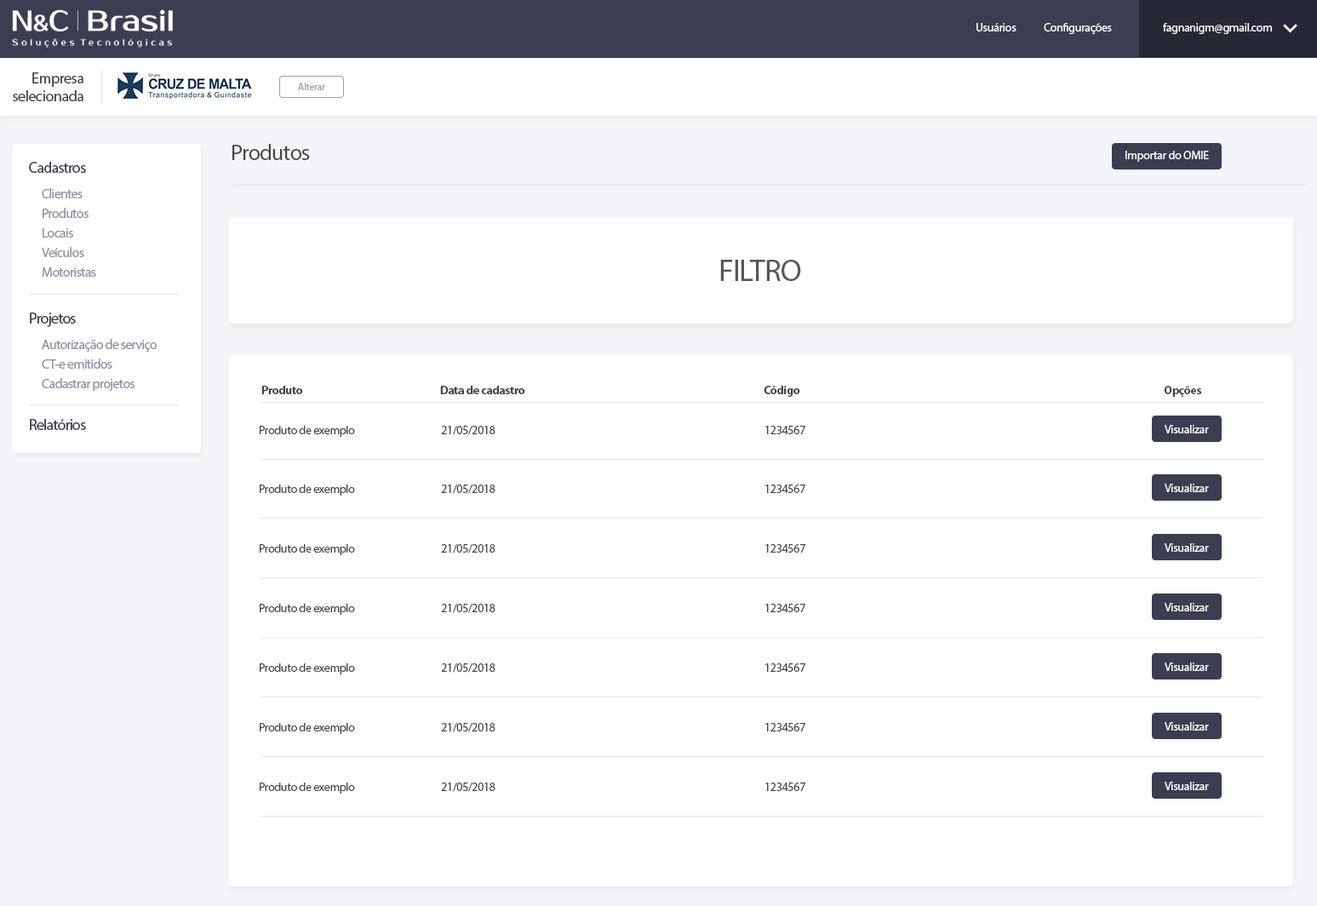
<style>
.page{position:relative;width:1317px;height:906px;background:#ffffff}
.page>*{position:absolute;margin:0}
.t1{font:11.9px "MyriadPro-Regular";letter-spacing:-0.025em;color:#ffffff}
.t2{font:15.3px/17.8px "MyriadPro-Regular";letter-spacing:-0.025em;color:#454545}
.t3{font:10.2px "MyriadPro-Regular";letter-spacing:-0.025em;color:#a2a2a2}
.t4{font:22.1px "MyriadPro-Regular";letter-spacing:-0.025em;color:#454545}
.t5{font:15.3px "MyriadPro-Regular";letter-spacing:-0.045em;color:#3b3e51}
.t6{font:13.6px "MyriadPro-Regular";letter-spacing:-0.045em;color:#8c8fa4}
.t7{font:30.6px "MyriadPro-Regular";letter-spacing:-0.025em;color:#575757}
.t8{font:13.6px "MyriadPro-Regular";letter-spacing:-0.045em;color:#8d90a5}
.t9{font:11.9px "MyriadPro-Bold";letter-spacing:-0.025em;color:#454545}
.t10{font:11.9px "MyriadPro-Regular";letter-spacing:-0.025em;color:#454545}
</style>
<div class="page">
<p class="t1" style="left:976px;top:23px;width:40px;height:8px">Usuários</p>
<p class="t1" style="left:1043px;top:23px;width:69px;height:11px">Configurações</p>
<p class="t1" style="left:1163px;top:23px;width:109px;height:11px">fagnanigm@gmail.com</p>
<p class="t2" style="left:13px;top:72px;width:70px;height:29px;text-align:right">Empresa<br>selecionada</p>
<p class="t3" style="left:298px;top:83px;width:27px;height:7px">Alterar</p>
<p class="t4" style="left:232px;top:144px;width:78px;height:16px">Produtos</p>
<p class="t5" style="left:29px;top:162px;width:57px;height:11px">Cadastros</p>
<p class="t1" style="left:1125px;top:151px;width:84px;height:11px">Importar do OMIE</p>
<p class="t6" style="left:42px;top:188px;width:41px;height:10px">Clientes</p>
<p class="t6" style="left:43px;top:208px;width:46px;height:10px">Produtos</p>
<p class="t6" style="left:43px;top:228px;width:30px;height:9px">Locais</p>
<p class="t6" style="left:42px;top:247px;width:42px;height:10px">Veículos</p>
<p class="t6" style="left:42px;top:267px;width:54px;height:10px">Motoristas</p>
<p class="t7" style="left:720px;top:260px;width:81px;height:21px">FILTRO</p>
<p class="t5" style="left:30px;top:312px;width:46px;height:15px">Projetos</p>
<p class="t8" style="left:42px;top:339px;width:115px;height:13px">Autorização de serviço</p>
<p class="t6" style="left:42px;top:358px;width:70px;height:11px">CT-e emitidos</p>
<p class="t6" style="left:42px;top:378px;width:92px;height:13px">Cadastrar projetos</p>
<p class="t9" style="left:261px;top:386px;width:42px;height:8px">Produto</p>
<p class="t9" style="left:440px;top:386px;width:85px;height:8px">Data de cadastro</p>
<p class="t9" style="left:763px;top:386px;width:37px;height:11px">Código</p>
<p class="t9" style="left:1164px;top:386px;width:38px;height:11px">Opções</p>
<p class="t5" style="left:30px;top:419px;width:56px;height:11px">Relatórios</p>
<p class="t10" style="left:260px;top:426px;width:95px;height:11px">Produto de exemplo</p>
<p class="t10" style="left:441px;top:426px;width:54px;height:9px">21/05/2018</p>
<p class="t10" style="left:765px;top:426px;width:40px;height:8px">1234567</p>
<p class="t1" style="left:1164px;top:425px;width:45px;height:8px">Visualizar</p>
<p class="t10" style="left:260px;top:484px;width:95px;height:11px">Produto de exemplo</p>
<p class="t10" style="left:441px;top:484px;width:54px;height:10px">21/05/2018</p>
<p class="t10" style="left:765px;top:484px;width:40px;height:9px">1234567</p>
<p class="t1" style="left:1164px;top:483px;width:45px;height:9px">Visualizar</p>
<p class="t10" style="left:260px;top:544px;width:95px;height:11px">Produto de exemplo</p>
<p class="t10" style="left:441px;top:544px;width:54px;height:9px">21/05/2018</p>
<p class="t10" style="left:765px;top:544px;width:40px;height:8px">1234567</p>
<p class="t1" style="left:1164px;top:543px;width:45px;height:9px">Visualizar</p>
<p class="t10" style="left:260px;top:603px;width:95px;height:12px">Produto de exemplo</p>
<p class="t10" style="left:441px;top:603px;width:54px;height:10px">21/05/2018</p>
<p class="t10" style="left:765px;top:603px;width:40px;height:9px">1234567</p>
<p class="t1" style="left:1164px;top:603px;width:45px;height:8px">Visualizar</p>
<p class="t10" style="left:260px;top:663px;width:95px;height:11px">Produto de exemplo</p>
<p class="t10" style="left:441px;top:663px;width:54px;height:9px">21/05/2018</p>
<p class="t10" style="left:765px;top:663px;width:40px;height:9px">1234567</p>
<p class="t1" style="left:1164px;top:662px;width:45px;height:9px">Visualizar</p>
<p class="t10" style="left:260px;top:723px;width:95px;height:11px">Produto de exemplo</p>
<p class="t10" style="left:441px;top:723px;width:54px;height:9px">21/05/2018</p>
<p class="t10" style="left:765px;top:723px;width:40px;height:8px">1234567</p>
<p class="t1" style="left:1164px;top:722px;width:45px;height:8px">Visualizar</p>
<p class="t10" style="left:260px;top:782px;width:95px;height:11px">Produto de exemplo</p>
<p class="t10" style="left:441px;top:782px;width:54px;height:10px">21/05/2018</p>
<p class="t10" style="left:765px;top:782px;width:40px;height:9px">1234567</p>
<p class="t1" style="left:1164px;top:781px;width:45px;height:9px">Visualizar</p>
</div>
